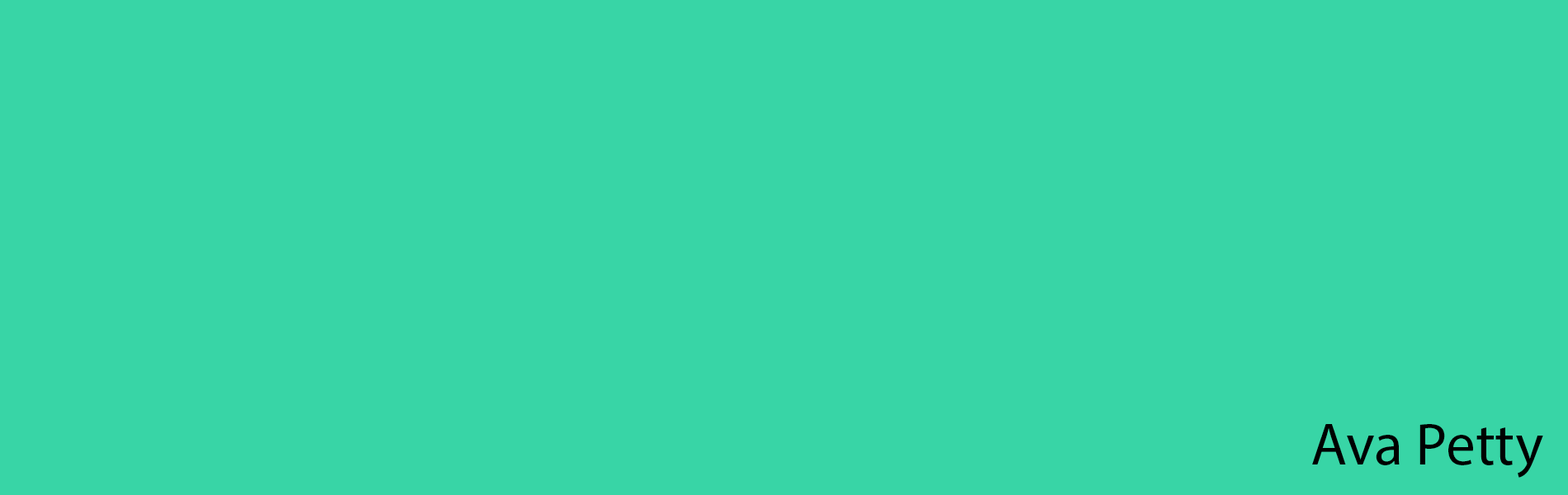
<style>
.page{position:relative;width:1568px;height:495px;background:#38d5a6}
.page>*{position:absolute;margin:0}
.t1{font:59.4px "MyriadPro-Regular";color:#000000}
</style>
<div class="page">
<p class="t1" style="left:1312px;top:424px;width:231px;height:54px">Ava Petty</p>
</div>
